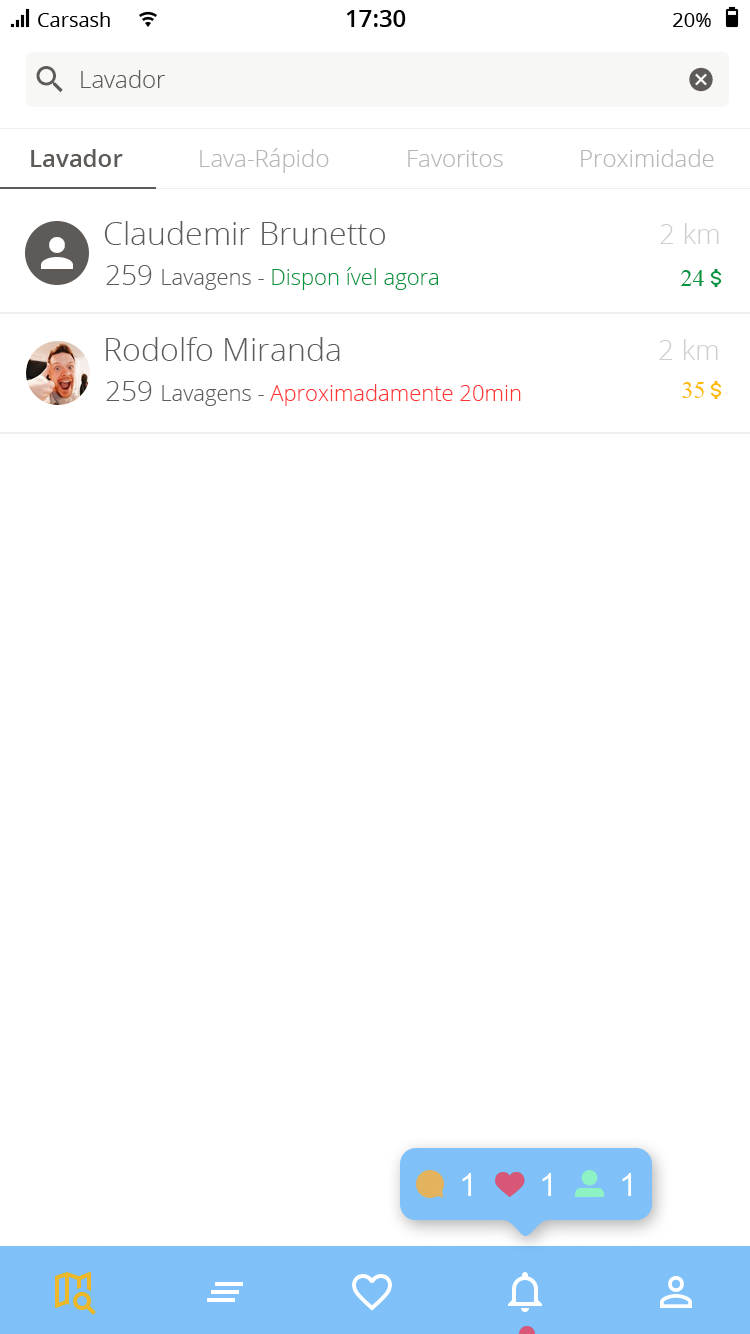
<style>
.page{position:relative;width:750px;height:1334px;background:#ffffff}
.page>*{position:absolute;margin:0}
.t1{font:24px "OpenSans-Light";color:#5d5a58}
.t2{font:24px "OpenSans-SemiBold";color:#5d5a58}
.t3{font:24px "OpenSans-Light";color:#b7b6b6}
.t4{font:32px "OpenSans-Light";color:#5d5a58}
.t5{font:28px "OpenSans-Light";color:#cfcecd}
.t6{font:22px "OpenSans-Light";color:#009640}
.t7{font:28px "OpenSans-Light";color:#5d5a58}
.t8{font:22px "OpenSans-Light";color:#5d5d5d}
.t9{font:24px "TimesNewRomanPSMT";color:#009640}
.t10{font:22px "OpenSans-Light";color:#ff3535}
.t11{font:24px "TimesNewRomanPSMT";color:#ffb900}
</style>
<div class="page">
<p class="t1" style="left:81px;top:70px;width:84px;height:18px">Lavador</p>
<p class="t2" style="left:31px;top:149px;width:92px;height:18px">Lavador</p>
<p class="t3" style="left:200px;top:148px;width:129px;height:25px">Lava-Rápido</p>
<p class="t3" style="left:408px;top:150px;width:95px;height:17px">Favoritos</p>
<p class="t3" style="left:581px;top:149px;width:133px;height:18px">Proximidade</p>
<p class="t4" style="left:104px;top:221px;width:281px;height:24px">Claudemir Brunetto</p>
<p class="t5" style="left:660px;top:223px;width:59px;height:21px">2 km</p>
<p class="t6" style="left:106px;top:265px;width:332px;height:25px"><span class="t7">259 </span><span class="t8">Lavagens - </span>Dispon ível agora</p>
<p class="t9" style="left:681px;top:270px;width:23px;height:16px">24</p>
<p class="t4" style="left:106px;top:337px;width:234px;height:24px">Rodolfo Miranda</p>
<p class="t5" style="left:659px;top:339px;width:59px;height:21px">2 km</p>
<p class="t10" style="left:106px;top:381px;width:415px;height:25px"><span class="t7">259 </span><span class="t8">Lavagens - </span>Aproximadamente 20min</p>
<p class="t11" style="left:682px;top:382px;width:22px;height:16px">35</p>
</div>
